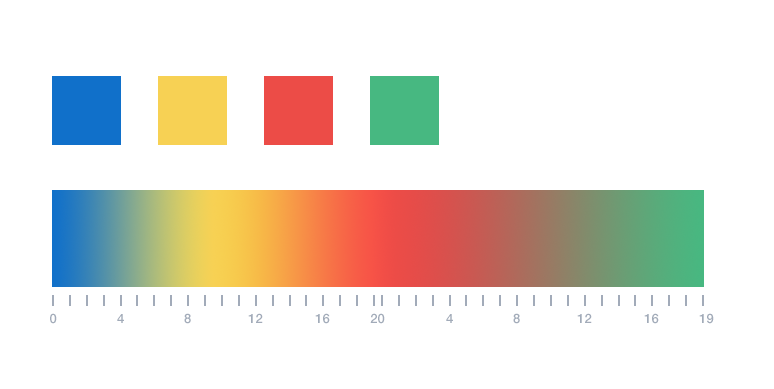
<style>
.page{position:relative;width:774px;height:389px;background:#ffffff}
.page>*{position:absolute;margin:0}
.t1{font:13px "HelveticaNeue-Medium";color:#a2abb9}
</style>
<div class="page">
<p class="t1" style="left:50px;top:313px;width:7px;height:11px">0</p>
<p class="t1" style="left:117px;top:314px;width:7px;height:9px">4</p>
<p class="t1" style="left:184px;top:313px;width:7px;height:11px">8</p>
<p class="t1" style="left:248px;top:313px;width:15px;height:10px">12</p>
<p class="t1" style="left:315px;top:313px;width:15px;height:11px">16</p>
<p class="t1" style="left:370px;top:313px;width:15px;height:11px">20</p>
<p class="t1" style="left:446px;top:314px;width:7px;height:9px">4</p>
<p class="t1" style="left:513px;top:313px;width:7px;height:11px">8</p>
<p class="t1" style="left:577px;top:313px;width:15px;height:10px">12</p>
<p class="t1" style="left:644px;top:313px;width:15px;height:11px">16</p>
<p class="t1" style="left:699px;top:313px;width:15px;height:11px">19</p>
</div>
